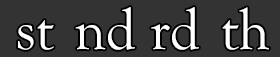
<style>
.page{position:relative;width:280px;height:57px;background:#333333}
.page>*{position:absolute;margin:0}
.t1{font:58.3px "GoudyOldStyleT-Regular";color:#ffffff}
</style>
<div class="page">
<p class="t1" style="left:75px;top:7px;width:60px;height:43px">nd</p>
<p class="t1" style="left:151px;top:7px;width:48px;height:43px">rd</p>
<p class="t1" style="left:222px;top:7px;width:47px;height:43px">th</p>
<p class="t1" style="left:18px;top:20px;width:36px;height:30px">st</p>
</div>
